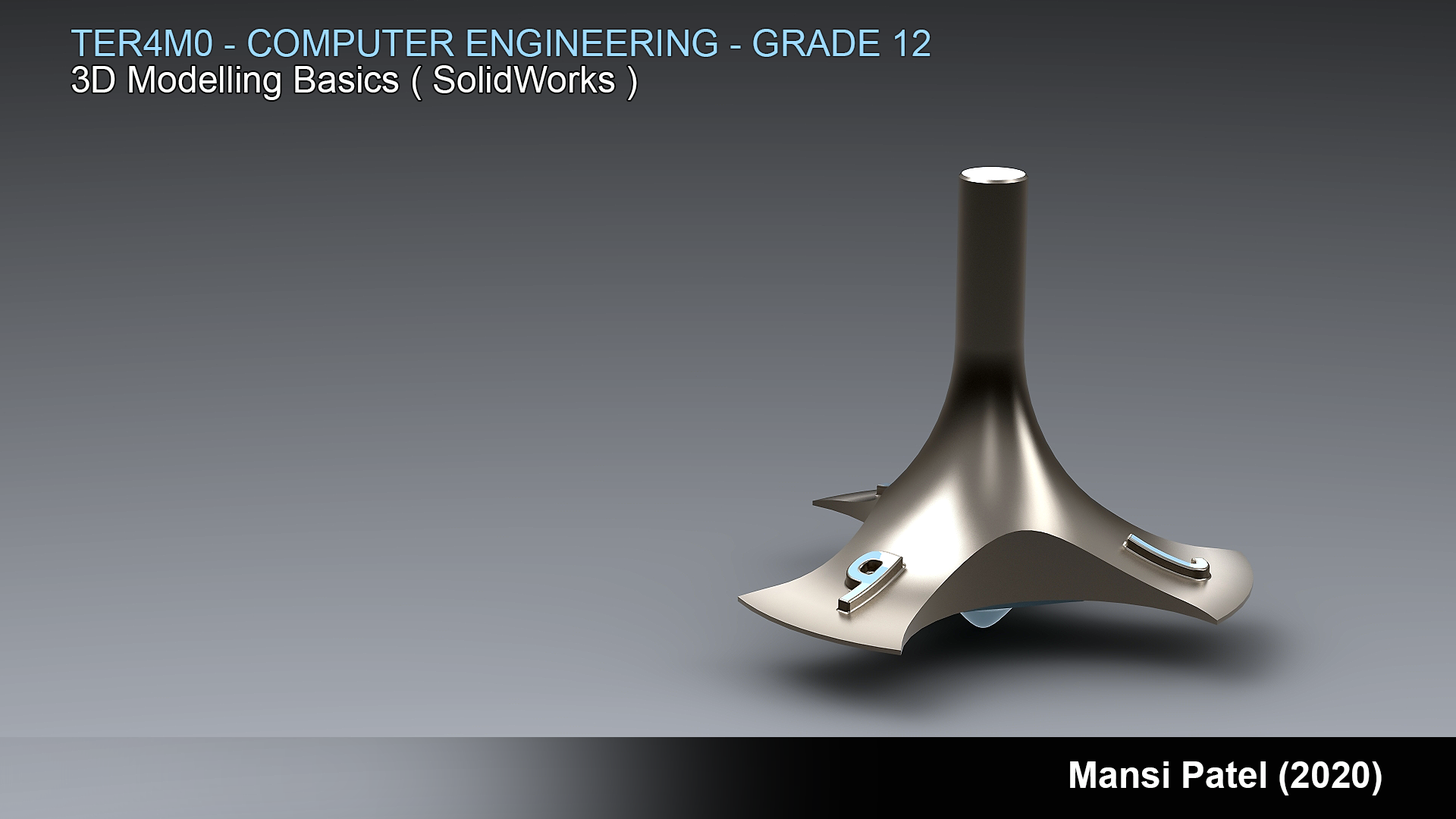
<style>
.page{position:relative;width:1456px;height:819px}
.page>*{position:absolute;margin:0}
.t1{font:36.4px "ArialMT";color:#a0dcff}
.t2{font:36.4px "ArialMT";color:#fefffe}
.t3{font:36.4px "Arial-BoldMT";color:#fefffe}
</style>
<div class="page">
<p class="t1" style="left:71px;top:29px;width:859px;height:28px">TER4M0 - COMPUTER ENGINEERING - GRADE 12</p>
<p class="t2" style="left:72px;top:65px;width:565px;height:35px">3D Modelling Basics ( SolidWorks )</p>
<p class="t3" style="left:1070px;top:761px;width:312px;height:34px">Mansi Patel (2020)</p>
</div>
